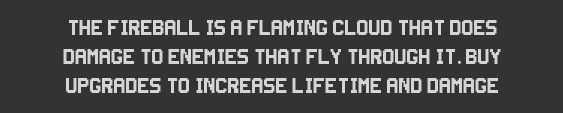
<style>
.page{position:relative;width:563px;height:113px;background:#333333}
.page>*{position:absolute;margin:0}
.t1{font:24px "Super-Smash-TV";color:#d4d4d4}
.t2{font:24px "MyriadPro-Regular";color:#d4d4d4}
</style>
<div class="page">
<p class="t1" style="left:63px;top:20px;width:438px;height:73px;text-align:center">The fireball is a flaming cloud that does damage to enemies that fly through it<span class="t2">.</span> Buy         upgrades to increase lifetime and damage</p>
</div>
